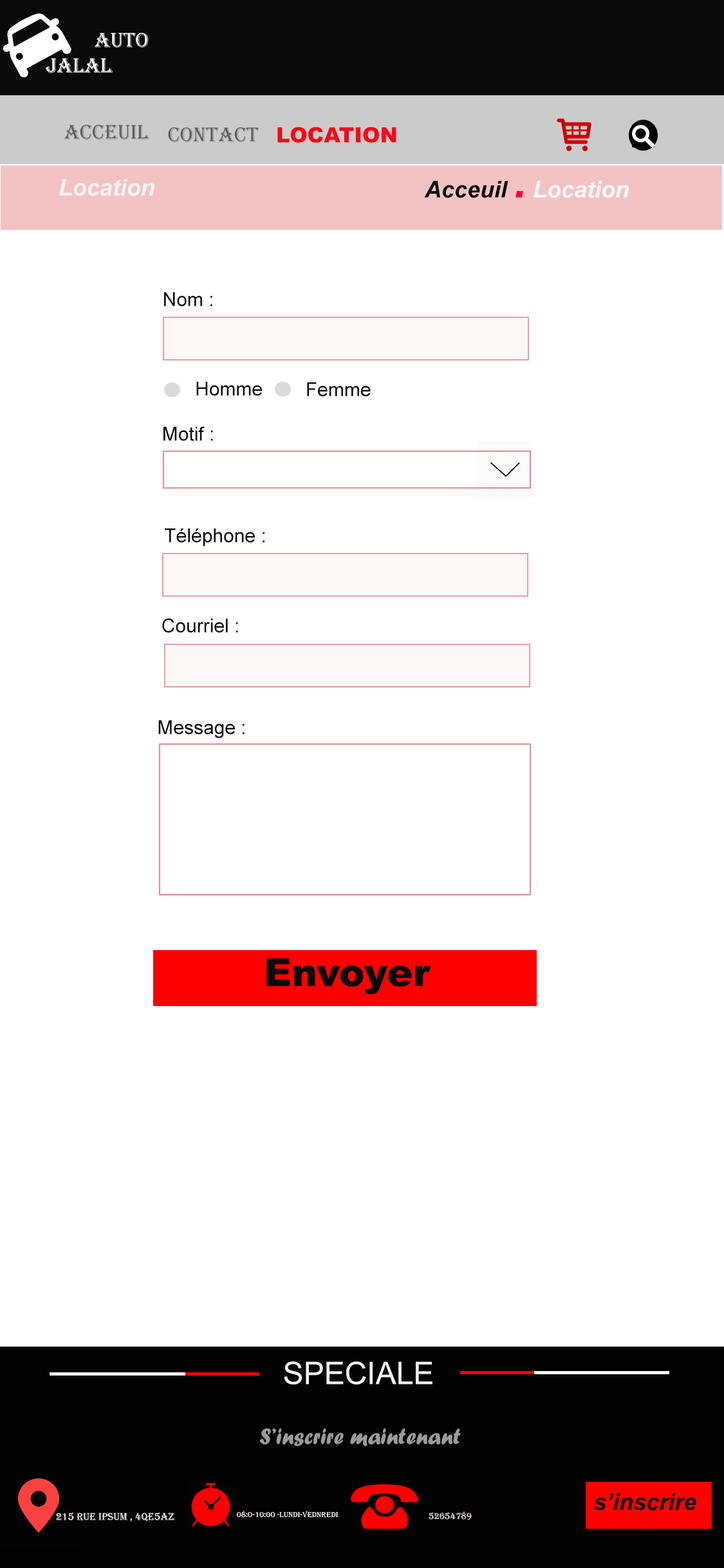
<style>
.page{position:relative;width:724px;height:1568px;background:#ffffff}
.page>*{position:absolute;margin:0}
.t1{font:21.2px "Algerian";color:#605f5f}
.t2{font:21.2px "Arial-Black";color:#f70718}
.t3{font:23.2px "Arial-BoldItalicMT";color:#f9f2f4}
.t4{font:23.2px "Arial-BoldItalicMT";color:#fbf7f8}
.t5{font:23.2px "Arial-BoldItalicMT";color:#090808}
.t6{font:46.3px "Arial-BoldItalicMT";color:#fd003c}
.t7{font:19.3px "ArialMT";color:#0b0a0a}
.t8{font:38.6px "Arial-Black";color:#0b0a0a}
.t9{font:30.9px "ArialMT";color:#f7f4f5}
.t10{font:23.2px "ForteMT";color:#9e999a}
.t11{font:23.2px "Arial-BoldItalicMT";color:#0e0b0c}
.t12{font:10.3px "Algerian";color:#f6eeee}
.t13{font:7.7px "Algerian";color:#f6eeee}
.t14{font:9px "Algerian";color:#f6eeee}
</style>
<div class="page">
<p class="t1" style="left:64px;top:124px;width:85px;height:16px">ACCEUIL</p>
<p class="t1" style="left:168px;top:127px;width:91px;height:15px">Contact</p>
<p class="t2" style="left:277px;top:127px;width:120px;height:16px">LOCATION</p>
<p class="t3" style="left:59px;top:179px;width:95px;height:17px">Location</p>
<p class="t4" style="left:424px;top:181px;width:206px;height:17px"><span class="t5">Acceuil </span><span class="t6">. </span>Location</p>
<p class="t7" style="left:164px;top:292px;width:48px;height:14px">Nom :</p>
<p class="t7" style="left:196px;top:382px;width:66px;height:14px">Homme</p>
<p class="t7" style="left:307px;top:382px;width:64px;height:15px">Femme</p>
<p class="t7" style="left:163px;top:426px;width:50px;height:15px">Motif :</p>
<p class="t7" style="left:165px;top:528px;width:100px;height:18px">Téléphone :</p>
<p class="t7" style="left:162px;top:618px;width:76px;height:15px">Courriel :</p>
<p class="t7" style="left:158px;top:720px;width:87px;height:18px">Message :</p>
<p class="t8" style="left:266px;top:958px;width:165px;height:36px">Envoyer</p>
<p class="t9" style="left:284px;top:1361px;width:149px;height:24px">SPECIALE</p>
<p class="t10" style="left:259px;top:1428px;width:202px;height:18px">S’inscrire maintenant</p>
<p class="t11" style="left:593px;top:1493px;width:103px;height:18px">s’inscrire</p>
<p class="t12" style="left:56px;top:1512px;width:119px;height:10px">215 Rue Ipsum , 4QE5Az</p>
<p class="t13" style="left:237px;top:1511px;width:102px;height:7px">08:0-10:00 -Lundi-VEDNREDI</p>
<p class="t14" style="left:429px;top:1511px;width:43px;height:9px">52654789</p>
</div>
